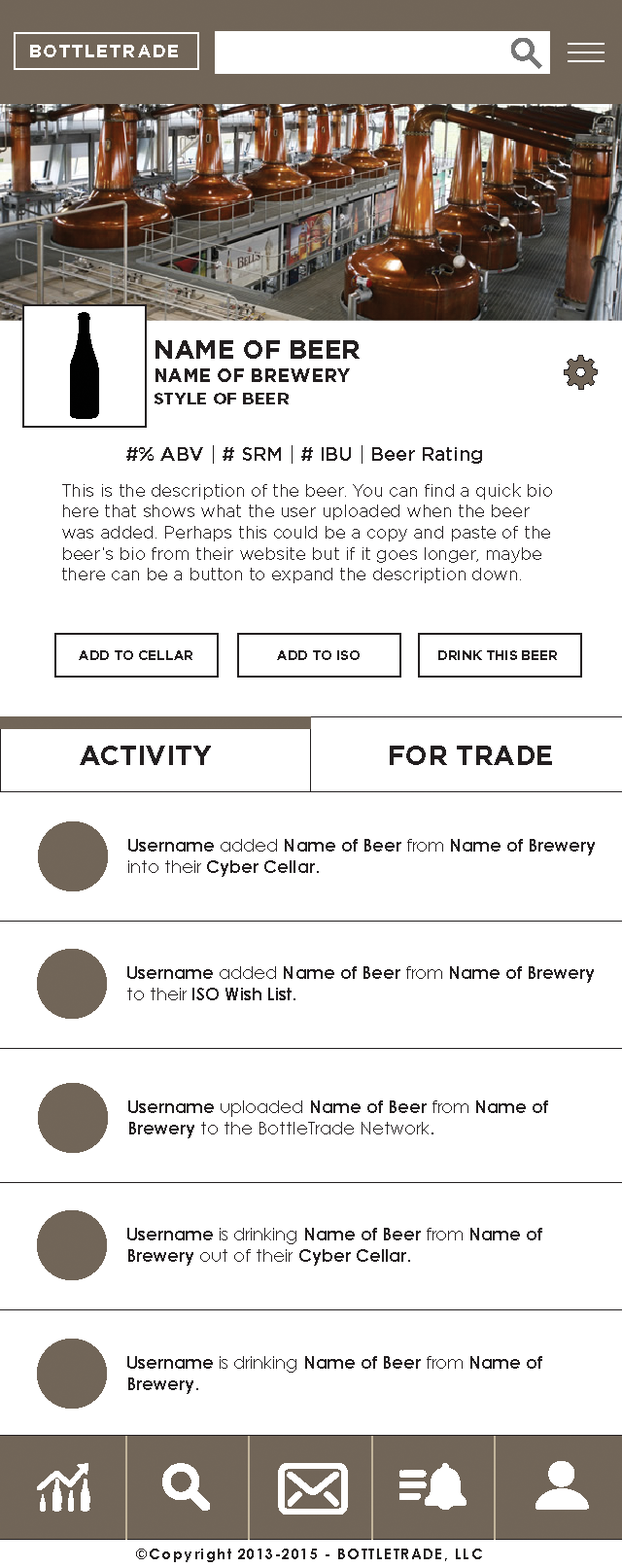
<style>
.page{position:relative;width:622px;height:1568px;background:#ffffff}
.page>*{position:absolute;margin:0}
.t1{font:17.5px "Gotham-Bold";letter-spacing:0.099em;color:#ffffff}
.t2{font:26.3px "Gotham-Bold";color:#231f20}
.t3{font:18.5px "Gotham-Bold";color:#231f20}
.t4{font:16.6px "Gotham-Bold";color:#231f20}
.t5{font:19.4px "Gotham-Medium";color:#231f20}
.t6{font:17.5px "Gotham-Book";color:#231f20}
.t7{font:13.6px "Gotham-Bold";color:#231f20}
.t8{font:27.2px "Gotham-Bold";color:#231f20}
.t9{font:17.5px "CenturyGothic-Bold";color:#231f20}
.t10{font:17.5px "CenturyGothic";color:#231f20}
.t11{font:14.6px "CenturyGothic-Bold";letter-spacing:0.099em;color:#231f20}
</style>
<div class="page">
<p class="t1" style="left:30px;top:45px;width:148px;height:12px">BOTTLETRADE</p>
<p class="t2" style="left:156px;top:340px;width:204px;height:19px">NAME OF BEER</p>
<p class="t3" style="left:156px;top:368px;width:194px;height:14px">NAME OF BREWERY</p>
<p class="t4" style="left:155px;top:393px;width:134px;height:11px">STYLE OF BEER</p>
<p class="t5" style="left:126px;top:445px;width:356px;height:19px">#% ABV | # SRM | # IBU | Beer Rating</p>
<p class="t6" style="left:62px;top:483px;width:490px;height:100px">This is the description of the beer. You can find a quick bio here that shows what the user uploaded when the beer was added. Perhaps this could be a copy and paste of the beer’s bio from their website but if it goes longer, maybe there can be a button to expand the description down.</p>
<p class="t7" style="left:79px;top:650px;width:113px;height:10px">ADD TO CELLAR</p>
<p class="t7" style="left:277px;top:650px;width:83px;height:10px">ADD TO ISO</p>
<p class="t7" style="left:438px;top:650px;width:119px;height:10px">DRINK THIS BEER</p>
<p class="t8" style="left:80px;top:746px;width:131px;height:19px">ACTIVITY</p>
<p class="t8" style="left:390px;top:746px;width:162px;height:19px">FOR TRADE</p>
<p class="t9" style="left:128px;top:839px;width:467px;height:38px">Username<span class="t10"> added </span>Name of Beer<span class="t10"> from </span>Name of Brewery<span class="t10"> <br>into their </span>Cyber Cellar<span class="t10">.</span></p>
<p class="t9" style="left:127px;top:966px;width:467px;height:34px">Username<span class="t10"> added </span>Name of Beer<span class="t10"> from </span>Name of Brewery<span class="t10"> <br>to their </span>ISO Wish List<span class="t10">.</span></p>
<p class="t10" style="left:128px;top:1100px;width:420px;height:38px"><span class="t9">Username</span> uploaded <span class="t9">Name of Beer</span> from <span class="t9">Name of <br>Brewery</span> to the BottleTrade Network.</p>
<p class="t9" style="left:127px;top:1228px;width:415px;height:38px">Username<span class="t10"> is drinking </span>Name of Beer<span class="t10"> from </span>Name of <br>Brewery<span class="t10"> out of their </span>Cyber Cellar<span class="t10">.</span></p>
<p class="t9" style="left:127px;top:1356px;width:415px;height:38px">Username<span class="t10"> is drinking </span>Name of Beer<span class="t10"> from </span>Name of <br>Brewery<span class="t10">.</span></p>
<p class="t11" style="left:136px;top:1549px;width:346px;height:13px">©Copyright 2013-2015 - BOTTLETRADE, LLC</p>
</div>
